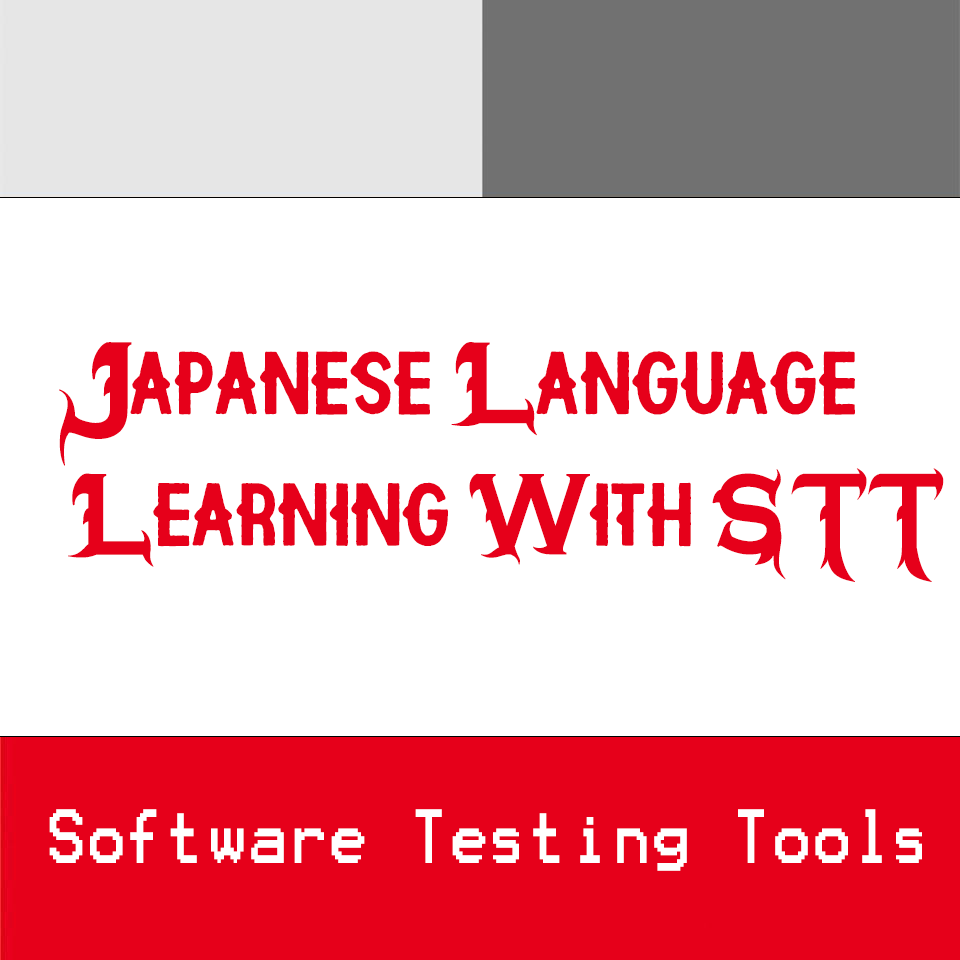
<style>
.page{position:relative;width:960px;height:960px;background:#ffffff}
.page>*{position:absolute;margin:0}
.t1{font:78.7px/14.6px "HipotesisFreePersonalUse";letter-spacing:0.025em;color:#e6001a;scale:0.85 1}
.t2{font:61.4px "Terminal";letter-spacing:0.025em;color:#ffffff;scale:0.85 1}
</style>
<div class="page">
<p class="t1" style="left:59px;top:342px;width:885px;height:240px">Japanese Language<br><br><br><br><br><br><br><br><br> Learning With STT</p>
<p class="t2" style="left:49px;top:809px;width:873px;height:62px">Software Testing Tools</p>
</div>
